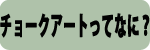
<style>
.page{position:relative;width:150px;height:50px;background:#afc2aa}
.page>*{position:absolute;margin:0}
.t1{font:25.8px "KozGoPr6N-Heavy";color:#020202;font-weight:bold;scale:0.48 1}
</style>
<div class="page">
<p class="t1" style="left:0px;top:13px;width:150px;height:25px">チョークアートってなに？</p>
</div>
